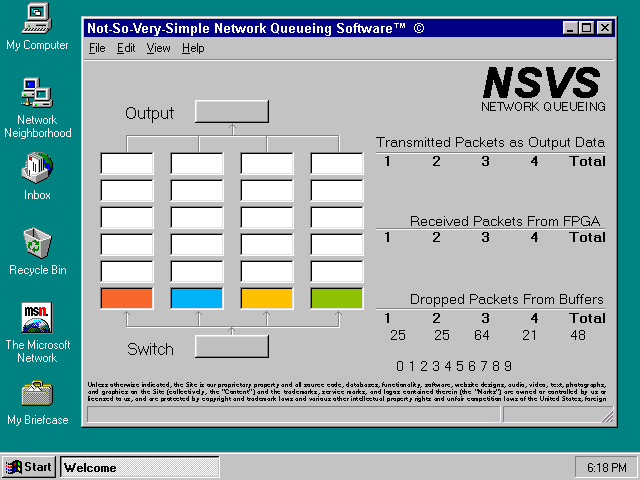
<style>
.page{position:relative;width:640px;height:480px;background:#c3c3c3}
.page>*{position:absolute;margin:0}
.t1{font:13px "Arial-BoldMT";color:#ffffff}
.t2{font:11.7px "MicrosoftSansSerif";color:#000000}
.t3{font:42.3px "Arial-BoldItalicMT";color:#000000;font-weight:bold}
.t4{font:16px "MicrosoftSansSerif";color:#000000}
.t5{font:14px "MicrosoftSansSerif";color:#000000}
.t6{font:14px "MicrosoftSansSerif";color:#000000;font-weight:bold}
.t7{font:6px "MyFont";color:#000000}
</style>
<div class="page">
<p class="t1" style="left:88px;top:23px;width:336px;height:13px">Not-So-Very-Simple Network Queueing Software™  ©</p>
<p class="t2" style="left:482px;top:67px;width:123px;height:44px"><span class="t3">NSVS <br></span>NETWORK QUEUEING</p>
<p class="t4" style="left:126px;top:107px;width:48px;height:16px">Output</p>
<p class="t5" style="left:376px;top:137px;width:229px;height:13px">Transmitted Packets as Output Data</p>
<p class="t6" style="left:385px;top:156px;width:220px;height:10px">1        2        3        4      Total</p>
<p class="t5" style="left:411px;top:216px;width:189px;height:10px">Received Packets From FPGA</p>
<p class="t6" style="left:385px;top:232px;width:220px;height:10px">1        2        3        4      Total</p>
<p class="t5" style="left:411px;top:294px;width:192px;height:13px">Dropped Packets From Buffers</p>
<p class="t6" style="left:385px;top:313px;width:220px;height:10px">1        2        3        4      Total</p>
<p class="t5" style="left:391px;top:330px;width:194px;height:10px">25       25      64        21        48</p>
<p class="t4" style="left:128px;top:343px;width:45px;height:12px">Switch</p>
<p class="t5" style="left:397px;top:361px;width:114px;height:10px">0 1 2 3 4 5 6 7 8 9</p>
<p class="t7" style="left:88px;top:382px;width:518px;height:20px;text-align:justify">Unless otherwise indicated, the Site is our proprietary property and all source code, databases, functionality, software, website designs, audio, video, text, photographs, and graphics on the Site (collectively, the "Content") and the trademarks, service marks, and logos contained therein (the "Marks") are owned or controlled by us or licensed to us, and are protected by copyright and trademark laws and various other intellectual property rights and unfair competition laws of the United States, foreign jurisdictions, saci international conventions.</p>
</div>
